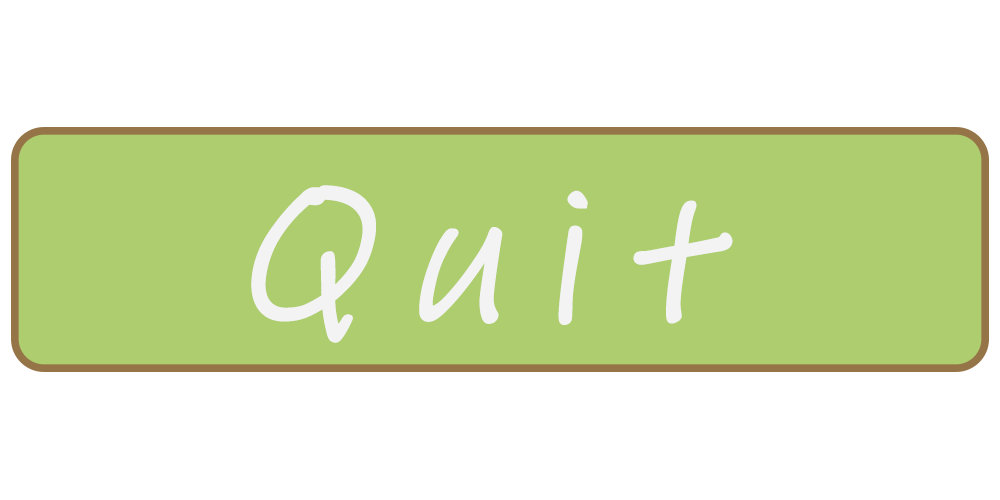
<style>
.page{position:relative;width:1000px;height:500px;background:#ffffff}
.page>*{position:absolute;margin:0}
.t1{font:184px "InkFree";letter-spacing:0.2em;color:#f4f4f4;font-weight:bold;font-style:italic}
</style>
<div class="page">
<p class="t1" style="left:251px;top:185px;width:482px;height:158px">Quit</p>
</div>
